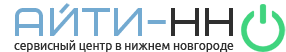
<style>
.page{position:relative;width:286px;height:52px;background:#ffffff}
.page>*{position:absolute;margin:0}
.t1{font:40px "Bicubik";letter-spacing:0.06em;color:#73aad1}
.t2{font:40px "Bicubik";letter-spacing:0.06em;color:#2f2f2f}
.t3{font:12px "Ubuntu";color:#2f2f2f}
</style>
<div class="page">
<p class="t1" style="left:15px;top:0px;width:218px;height:36px">Айти-<span class="t2">НН</span></p>
<p class="t3" style="left:14px;top:40px;width:220px;height:12px">сервисный центр в нижнем новгороде</p>
</div>
